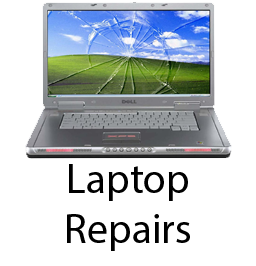
<style>
.page{position:relative;width:256px;height:266px;background:#ffffff}
.page>*{position:absolute;margin:0}
.t1{font:41.7px "MyriadPro-Regular";color:#000000}
</style>
<div class="page">
<p class="t1" style="left:67px;top:164px;width:123px;height:87px;text-align:center">Laptop<br>Repairs</p>
</div>
